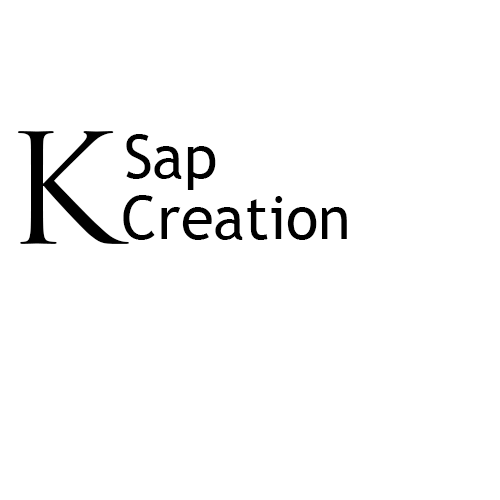
<style>
.page{position:relative;width:500px;height:500px;background:#ffffff}
.page>*{position:absolute;margin:0}
.t1{font:150px "TrajanPro-Regular";color:#000000}
.t2{font:60px "TrebuchetMS";color:#000000}
.t3{font:59.8px "TrebuchetMS";color:#000000}
</style>
<div class="page">
<p class="t1" style="left:17px;top:131px;width:112px;height:113px">K</p>
<p class="t2" style="left:126px;top:134px;width:90px;height:56px">Sap</p>
<p class="t3" style="left:123px;top:195px;width:224px;height:45px">Creation</p>
</div>
